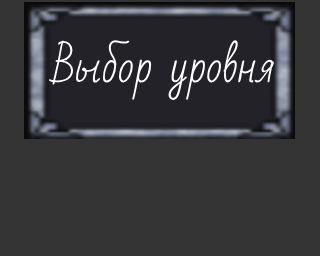
<style>
.page{position:relative;width:320px;height:256px;background:#333333}
.page>*{position:absolute;margin:0}
.t1{font:43px "BadScript-Regular";color:#ffffff}
</style>
<div class="page">
<p class="t1" style="left:48px;top:40px;width:226px;height:60px">Выбор уровня</p>
</div>
